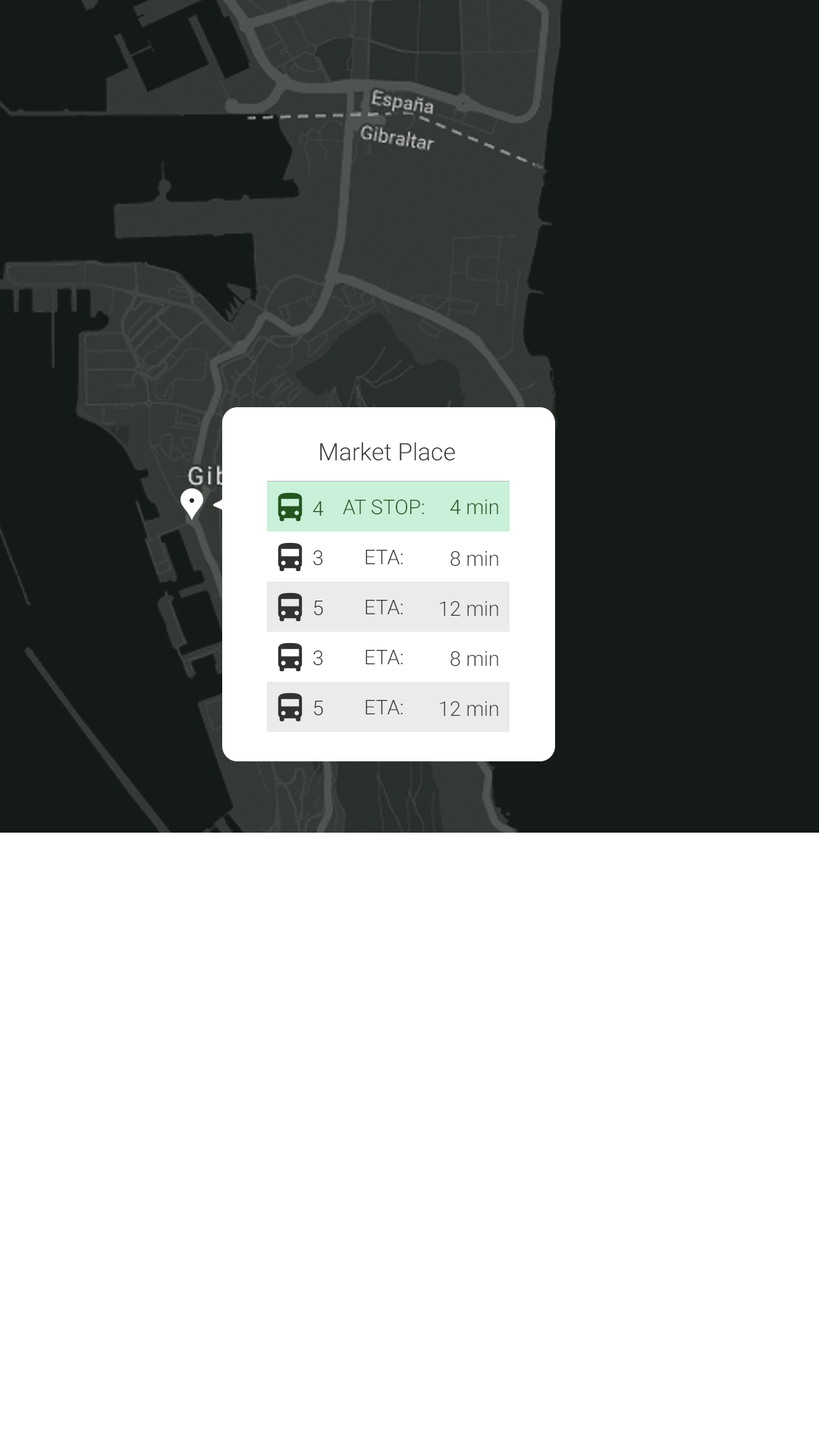
<style>
.page{position:relative;width:819px;height:1456px;background:#ffffff}
.page>*{position:absolute;margin:0}
.t1{font:24.1px "Roboto-Light";color:#343434}
.t2{font:20.2px "Roboto-Light";color:#23551e}
.t3{font:20.2px "Roboto-Light";color:#313131}
.t4{font:20.2px "Roboto-Light";color:#343434}
.t5{font:20.2px "Roboto-Light";color:#414141}
</style>
<div class="page">
<p class="t1" style="left:320px;top:442px;width:135px;height:19px">Market Place</p>
<p class="t2" style="left:312px;top:501px;width:12px;height:15px">4</p>
<p class="t2" style="left:343px;top:499px;width:81px;height:16px">AT STOP:</p>
<p class="t2" style="left:450px;top:499px;width:48px;height:15px">4 min</p>
<p class="t3" style="left:313px;top:550px;width:10px;height:16px">3</p>
<p class="t4" style="left:366px;top:550px;width:37px;height:14px">ETA:</p>
<p class="t5" style="left:450px;top:551px;width:48px;height:15px">8 min</p>
<p class="t3" style="left:314px;top:601px;width:9px;height:15px">5</p>
<p class="t4" style="left:366px;top:600px;width:37px;height:14px">ETA:</p>
<p class="t5" style="left:440px;top:601px;width:58px;height:15px">12 min</p>
<p class="t3" style="left:313px;top:650px;width:10px;height:16px">3</p>
<p class="t4" style="left:366px;top:650px;width:37px;height:14px">ETA:</p>
<p class="t5" style="left:450px;top:651px;width:48px;height:16px">8 min</p>
<p class="t3" style="left:314px;top:701px;width:9px;height:15px">5</p>
<p class="t4" style="left:366px;top:700px;width:37px;height:14px">ETA:</p>
<p class="t5" style="left:440px;top:701px;width:58px;height:15px">12 min</p>
</div>
